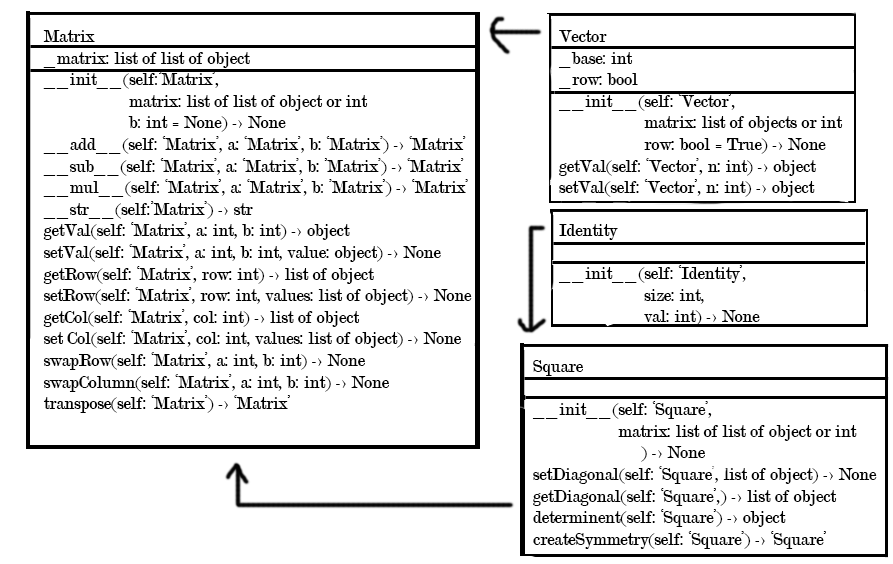
<style>
.page{position:relative;width:893px;height:564px;background:#ffffff}
.page>*{position:absolute;margin:0}
.t1{font:18px "Modern-Regular";color:#000000}
</style>
<div class="page">
<p class="t1" style="left:43px;top:30px;width:429px;height:383px">Matrix<br>_matrix: list of list of object<br>__init__(self:’Matrix’, <br>     matrix: list of list of object or int<br>     b: int = None) -&gt; None<br>__add__(self: ‘Matrix’, a: ‘Matrix’, b: ‘Matrix’) -&gt; ‘Matrix’<br>__sub__(self: ‘Matrix’, a: ‘Matrix’, b: ’Matrix’) -&gt; ‘Matrix’<br>__mul__(self: ‘Matrix’, a: ‘Matrix’, b: ’Matrix’) -&gt; ‘Matrix’<br>__str__(self:’Matrix’) -&gt; str<br>getVal(self: ‘Matrix’, a: int, b: int) -&gt; object<br>setVal(self: ‘Matrix’, a: int, b: int, value: object) -&gt; None<br>getRow(self: ‘Matrix’, row: int) -&gt; list of object<br>setRow(self: ‘Matrix’, row: int, values: list of object) -&gt; None<br>getCol(self: ‘Matrix’, col: int) -&gt; list of object<br>set Col(self: ‘Matrix’, col: int, values: list of object) -&gt; None <br>swapRow(self: ‘Matrix’, a: int, b: int) -&gt; None<br>swapColumn(self: ‘Matrix’, a: int, b: int) -&gt; None<br>transpose(self: ‘Matrix’) -&gt; ‘Matrix’</p>
<p class="t1" style="left:558px;top:30px;width:285px;height:167px">Vector<br>_base: int<br>_row: bool<br>__init__(self: ‘Vector’, <br>     matrix: list of objects or int<br>     row: bool = True) -&gt; None<br>getVal(self: ‘Vector’, n: int) -&gt; object<br>setVal(self: ‘Vector’, n: int) -&gt; object</p>
<p class="t1" style="left:558px;top:224px;width:202px;height:102px">Identity<br><br>__init__(self: ‘Identity’,<br>     size: int,<br>     val: int) -&gt; None</p>
<p class="t1" style="left:532px;top:360px;width:345px;height:189px">Square<br><br>__init__(self: ‘Square’, <br>     matrix: list of list of object or int<br>   ) -&gt; None<br>setDiagonal(self: ‘Square’, list of object) -&gt; None<br>getDiagonal(self: ‘Square’,) -&gt; list of object<br>determinent(self: ‘Square’) -&gt; object<br>createSymmetry(self: ‘Square’) -&gt; ‘Square’</p>
</div>
